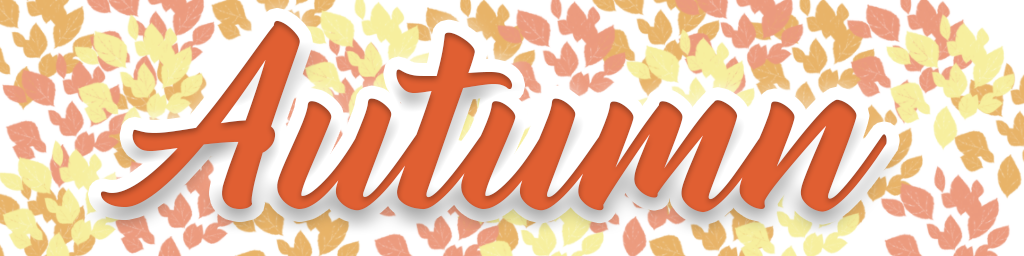
<style>
.page{position:relative;width:1024px;height:256px;background:#ffffff}
.page>*{position:absolute;margin:0}
.t1{font:215.1px "Bernadette";color:#e05f32}
</style>
<div class="page">
<p class="t1" style="left:100px;top:20px;width:787px;height:193px">Autumn</p>
</div>
